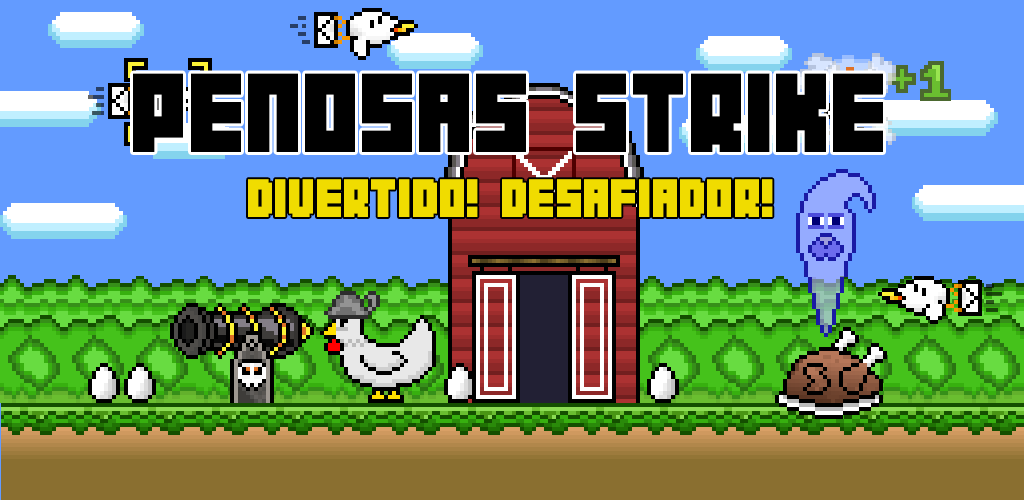
<style>
.page{position:relative;width:1024px;height:500px;background:#639bff}
.page>*{position:absolute;margin:0}
.t1{font:100px "04b19";color:#000000}
.t2{font:48px "04b19";color:#f0dc00}
</style>
<div class="page">
<p class="t1" style="left:133px;top:73px;width:750px;height:79px">PENOSAS STRIKE</p>
<p class="t2" style="left:248px;top:179px;width:525px;height:38px">DIVERTIDO! DESAFIADOR!</p>
</div>
